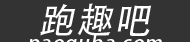
<style>
.page{position:relative;width:190px;height:42px;background:#333333}
.page>*{position:absolute;margin:0}
.t1{font:36px "AdobeHeitiStd-Regular";letter-spacing:0.05em;color:#ffffff;font-style:italic}
</style>
<div class="page">
<p class="t1" style="left:40px;top:3px;width:112px;height:33px">跑趣吧</p>
</div>
